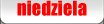
<style>
.page{position:relative;width:104px;height:24px}
.page>*{position:absolute;margin:0}
.t1{font:18.8px "Impact";color:#ff0000}
</style>
<div class="page">
<p class="t1" style="left:17px;top:0px;width:70px;height:16px">niedziela</p>
</div>
